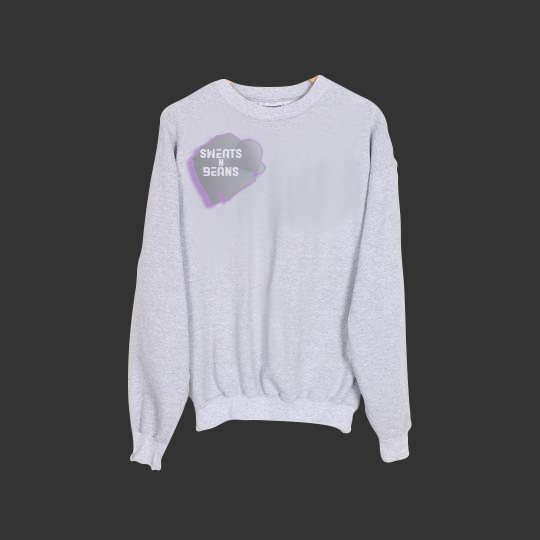
<style>
.page{position:relative;width:540px;height:540px;background:#333333}
.page>*{position:absolute;margin:0}
.t1{font:15.4px "ACETONE";color:#e1e0e8}
.t2{font:11.4px "ACETONE";color:#e2e0e8}
</style>
<div class="page">
<p class="t1" style="left:200px;top:149px;width:42px;height:27px;text-align:center">SWEATS<br>BEANS</p>
<p class="t2" style="left:218px;top:159px;width:6px;height:7px">N</p>
</div>
